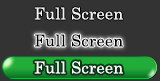
<style>
.page{position:relative;width:160px;height:81px;background:#333333}
.page>*{position:absolute;margin:0}
.t1{font:16px "CenturySchoolbook";letter-spacing:0.025em;color:#f1f1f1}
.t2{font:16px "CenturySchoolbook";letter-spacing:0.025em;color:#000000}
.t3{font:16px "CenturySchoolbook";letter-spacing:0.025em;color:#ffffff}
</style>
<div class="page">
<p class="t1" style="left:34px;top:7px;width:89px;height:13px">Full Screen</p>
<p class="t2" style="left:34px;top:34px;width:89px;height:13px">Full Screen</p>
<p class="t3" style="left:34px;top:61px;width:89px;height:13px">Full Screen</p>
</div>
